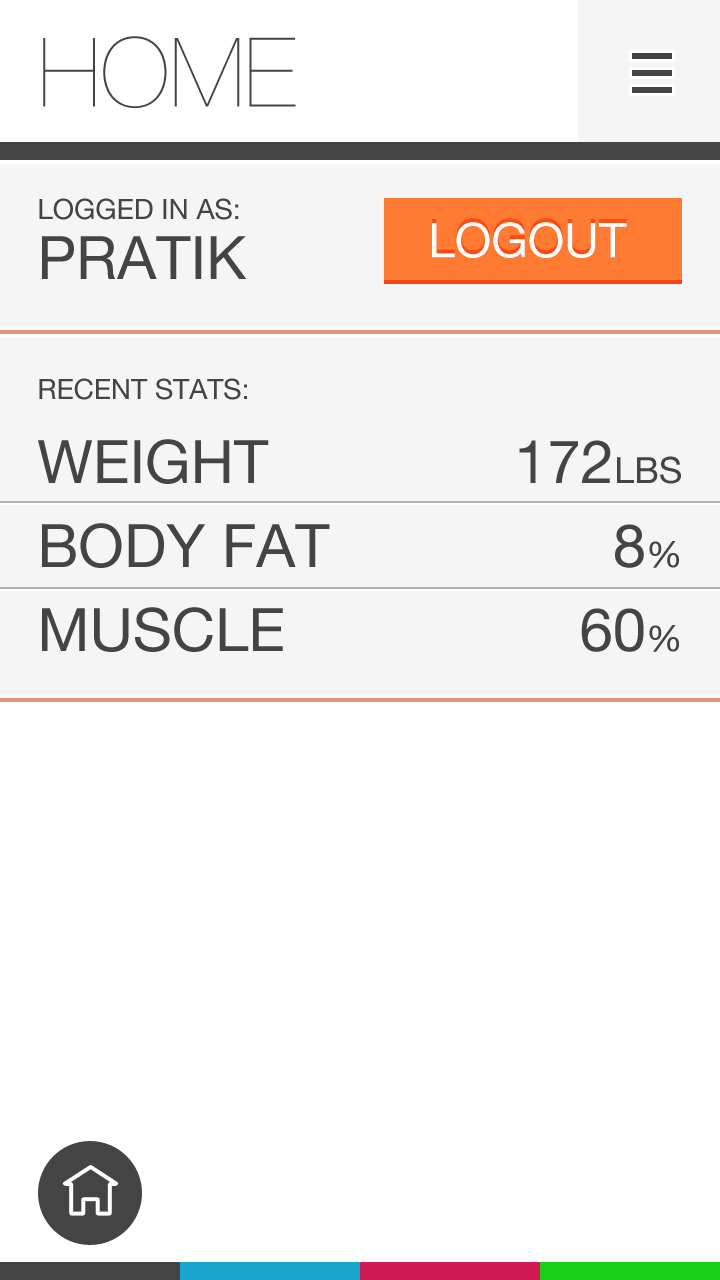
<style>
.page{position:relative;width:720px;height:1280px;background:#ffffff}
.page>*{position:absolute;margin:0}
.t1{font:96px "HelveticaNeue-UltraLight";color:#444444}
.t2{font:28px/60px "HelveticaNeue";color:#444444}
.t3{font:60px/60px "HelveticaNeue";color:#444444}
.t4{font:48px "HelveticaNeue";color:#ffffff}
.t5{font:60px/84px "HelveticaNeue";color:#444444}
.t6{font:36px/84px "HelveticaNeue";color:#444444}
</style>
<div class="page">
<p class="t1" style="left:43px;top:36px;width:253px;height:72px">HOME</p>
<p class="t2" style="left:39px;top:198px;width:208px;height:81px">LOGGED IN AS:<span class="t3"><br>PRATIK</span></p>
<p class="t4" style="left:432px;top:222px;width:195px;height:36px">LOGOUT</p>
<p class="t5" style="left:38px;top:378px;width:292px;height:274px"><span class="t2">RECENT STATS:<br></span>WEIGHT<br>BODY FAT<br>MUSCLE</p>
<p class="t5" style="left:519px;top:440px;width:162px;height:212px;text-align:right"><span class="t2"><br></span>172<span class="t6">LBS<br></span>8<span class="t6">%<br></span>60<span class="t6">%</span></p>
</div>
